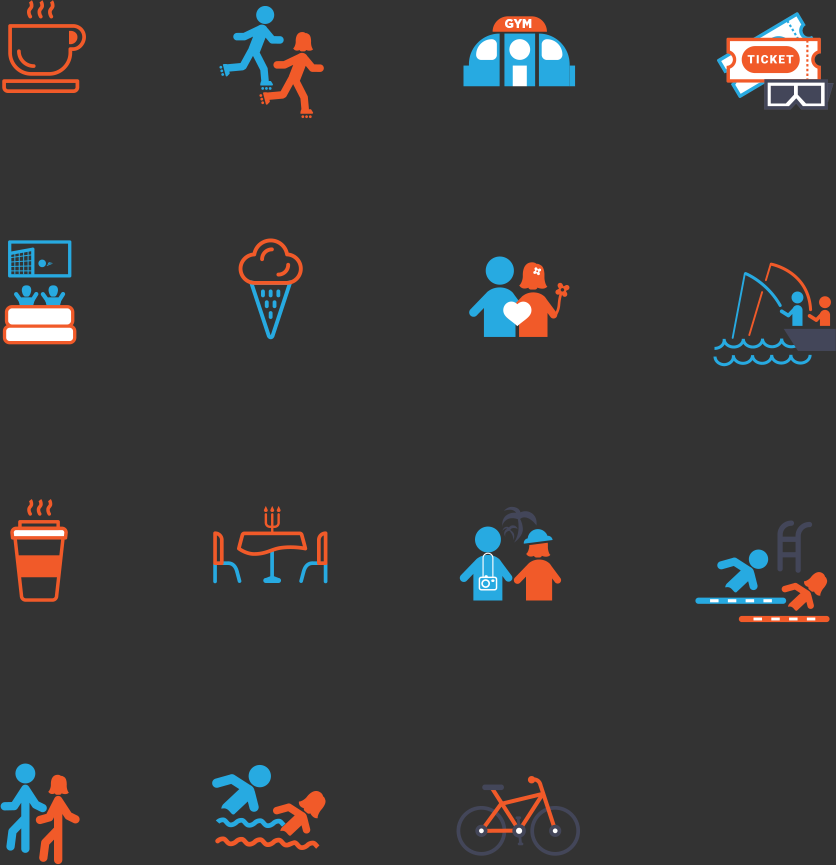
<style>
.page{position:relative;width:836px;height:865px;background:#333333}
.page>*{position:absolute;margin:0}
.t1{font:11.9px "Gotham-Black";color:#ffffff}
</style>
<div class="page">
<p class="t1" style="left:505px;top:19px;width:27px;height:9px">GYM</p>
</div>
